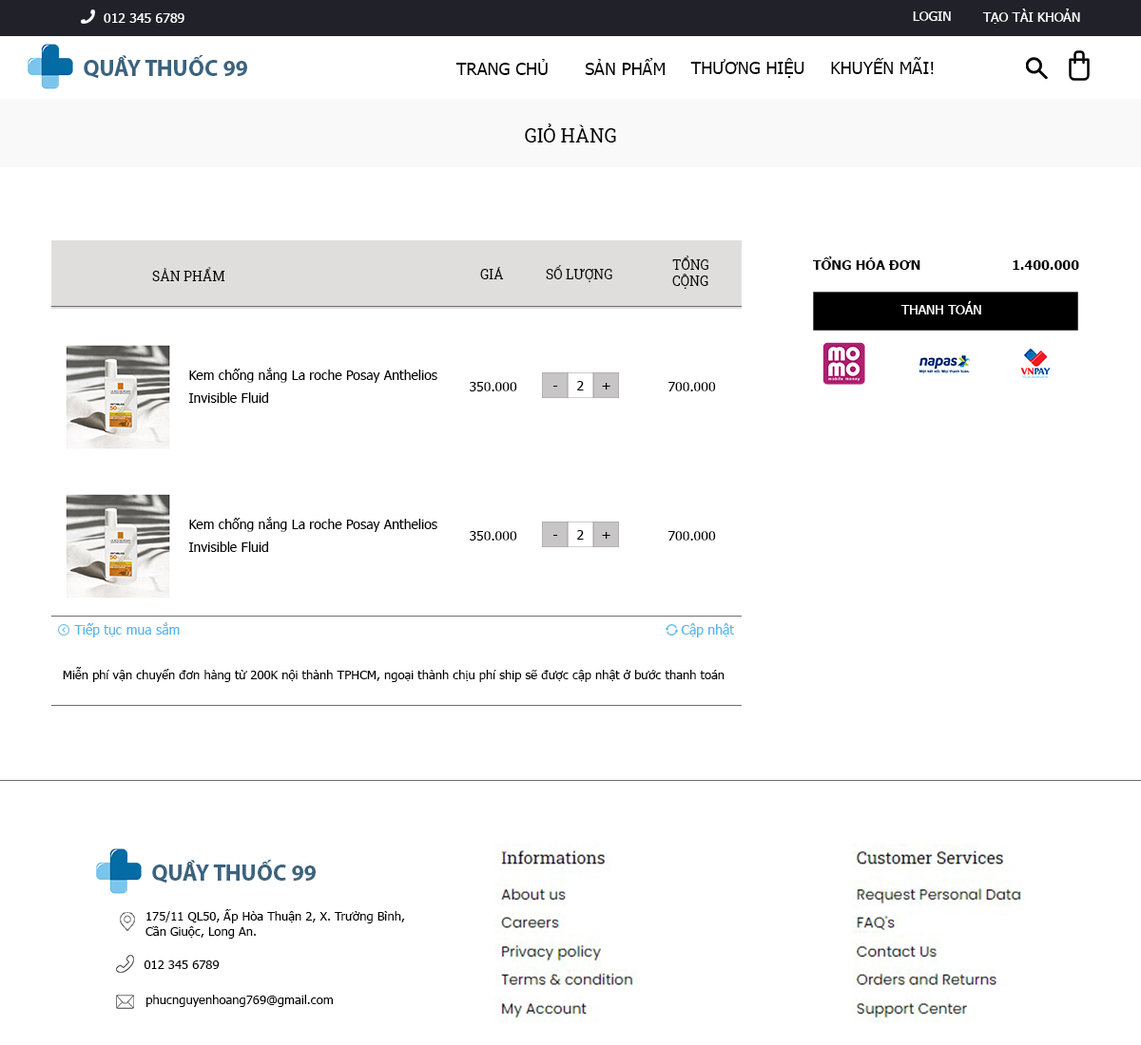
<style>
.page{position:relative;width:1141px;height:1045px;background:#ffffff}
.page>*{position:absolute;margin:0}
.t1{font:13.3px "Tahoma";color:#ffffff}
.t2{font:22.8px "MyriadPro-Bold";color:#3a637f}
.t3{font:17.1px "Tahoma";color:#000000}
.t4{font:19px "RobotoSlab-Regular";color:#000000}
.t5{font:13.3px "RobotoSlab-Regular";color:#000000}
.t6{font:13.3px "Tahoma-Bold";color:#000000}
.t7{font:13.3px/22.8px "Tahoma";color:#000000}
.t8{font:13.3px "Tahoma";color:#000000}
.t9{font:13.3px "Tahoma";color:#57b6ea}
.t10{font:12.4px "Tahoma";color:#000000}
</style>
<div class="page">
<p class="t1" style="left:104px;top:13px;width:80px;height:10px">012 345 6789</p>
<p class="t1" style="left:912px;top:11px;width:38px;height:10px">LOGIN</p>
<p class="t1" style="left:982px;top:9px;width:98px;height:15px">TẠO TÀI KHOẢN</p>
<p class="t2" style="left:84px;top:55px;width:163px;height:24px">QUẦY THUỐC 99</p>
<p class="t3" style="left:455px;top:59px;width:92px;height:16px">TRANG CHỦ</p>
<p class="t3" style="left:585px;top:58px;width:80px;height:17px">SẢN PHẨM</p>
<p class="t3" style="left:690px;top:58px;width:114px;height:20px">THƯƠNG HIỆU</p>
<p class="t3" style="left:831px;top:57px;width:102px;height:17px">KHUYẾN MÃI!</p>
<p class="t4" style="left:525px;top:124px;width:91px;height:19px">GIỎ HÀNG</p>
<p class="t5" style="left:672px;top:256px;width:36px;height:33px">TỔNG<br>CỘNG</p>
<p class="t6" style="left:813px;top:257px;width:107px;height:13px">TỔNG HÓA ĐƠN</p>
<p class="t5" style="left:152px;top:267px;width:73px;height:14px">SẢN PHẨM</p>
<p class="t5" style="left:480px;top:267px;width:24px;height:12px">GIÁ</p>
<p class="t5" style="left:546px;top:265px;width:66px;height:17px">SỐ LƯỢNG</p>
<p class="t6" style="left:1012px;top:260px;width:67px;height:10px">1.400.000</p>
<p class="t1" style="left:900px;top:301px;width:81px;height:14px">THANH TOÁN</p>
<p class="t7" style="left:189px;top:368px;width:248px;height:35px">Kem chống nắng La roche Posay Anthelios Invisible Fluid</p>
<p class="t8" style="left:470px;top:382px;width:47px;height:10px">350.000</p>
<p class="t8" style="left:553px;top:386px;width:5px;height:1px">-</p>
<p class="t8" style="left:577px;top:381px;width:7px;height:10px">2</p>
<p class="t8" style="left:602px;top:383px;width:8px;height:7px">+</p>
<p class="t8" style="left:668px;top:382px;width:48px;height:10px">700.000</p>
<p class="t7" style="left:189px;top:517px;width:248px;height:35px">Kem chống nắng La roche Posay Anthelios Invisible Fluid</p>
<p class="t8" style="left:470px;top:531px;width:47px;height:10px">350.000</p>
<p class="t8" style="left:577px;top:530px;width:7px;height:10px">2</p>
<p class="t8" style="left:602px;top:532px;width:8px;height:7px">+</p>
<p class="t8" style="left:668px;top:531px;width:48px;height:10px">700.000</p>
<p class="t8" style="left:553px;top:535px;width:5px;height:1px">-</p>
<p class="t9" style="left:74px;top:623px;width:106px;height:15px">Tiếp tục mua sắm</p>
<p class="t9" style="left:681px;top:623px;width:53px;height:15px">Cập nhật</p>
<p class="t10" style="left:63px;top:667px;width:661px;height:15px">Miễn phí vận chuyển đơn hàng từ 200K nội thành TPHCM, ngoại thành chịu phí ship sẽ được cập nhật ở bước thanh toán</p>
<p class="t2" style="left:152px;top:860px;width:164px;height:24px">QUẦY THUỐC 99</p>
<p class="t10" style="left:145px;top:910px;width:260px;height:29px">175/11 QL50, Ấp Hòa Thuận 2, X. Trường Bình, <br>Cần Giuộc, Long An.</p>
<p class="t10" style="left:144px;top:961px;width:76px;height:8px">012 345 6789</p>
<p class="t10" style="left:146px;top:995px;width:187px;height:12px">phucnguyenhoang769@gmail.com</p>
</div>
